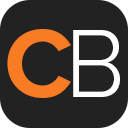
<style>
.page{position:relative;width:128px;height:128px;background:#222222}
.page>*{position:absolute;margin:0}
.t1{font:100px "ProximaNova-Bold";letter-spacing:-0.08em;color:#f87c23;text-transform:uppercase}
.t2{font:100px "ProximaNova-Light";letter-spacing:-0.08em;color:#ffffff;text-transform:uppercase}
</style>
<div class="page">
<p class="t1" style="left:7px;top:29px;width:113px;height:69px">С<span class="t2">В</span></p>
</div>
